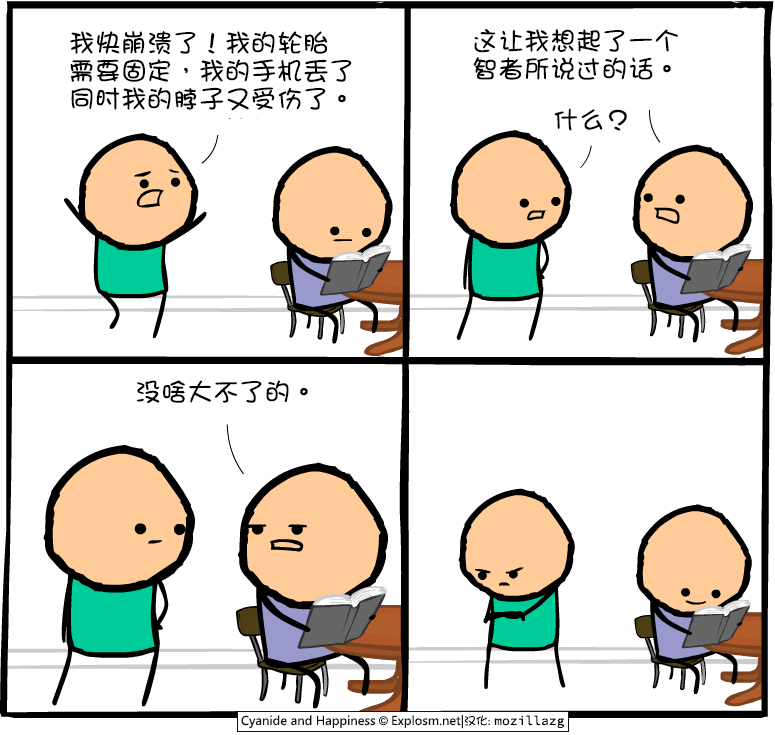
<style>
.page{position:relative;width:775px;height:735px;background:#ffffff}
.page>*{position:absolute;margin:0}
.t1{font:26px/28px "DFGirl";color:#000000}
.t2{font:26px "DFGirl";color:#000000}
</style>
<div class="page">
<p class="t1" style="left:70px;top:30px;width:282px;height:81px">我快崩溃了！我的轮胎<br>需要固定，我的手机丢了<br>同时我的脖子又受伤了。</p>
<p class="t1" style="left:473px;top:29px;width:205px;height:51px">这让我想起了一个<br>智者所说过的话。</p>
<p class="t2" style="left:554px;top:108px;width:73px;height:23px">什么？</p>
<p class="t2" style="left:136px;top:380px;width:172px;height:24px">没啥大不了的。</p>
</div>
